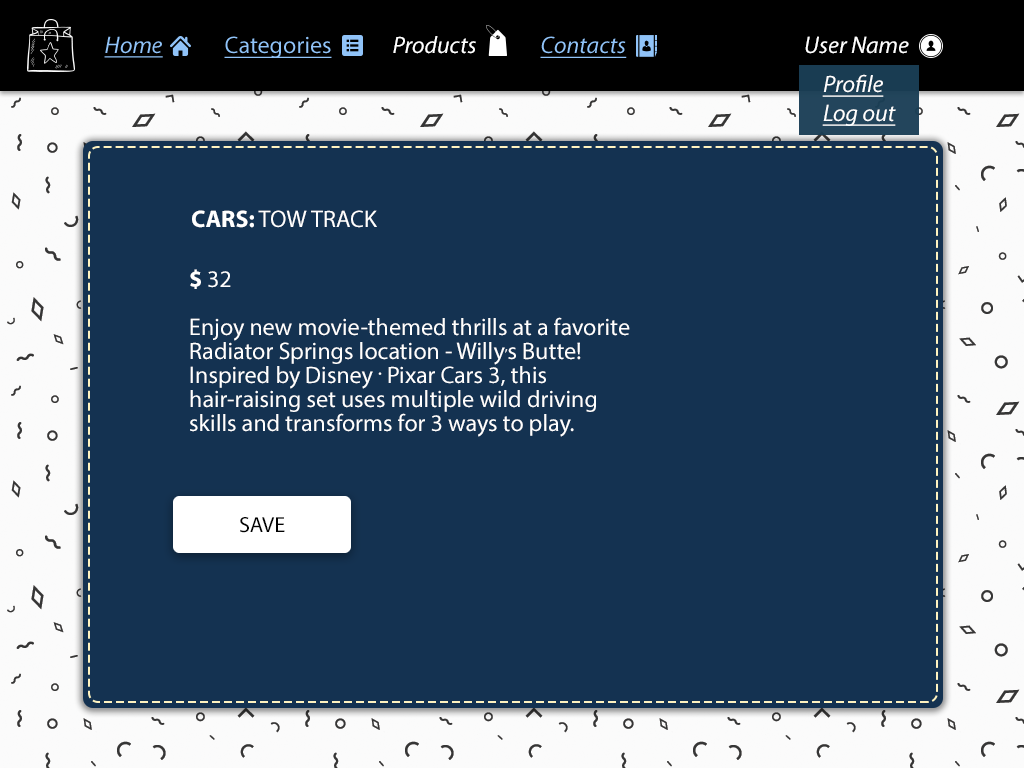
<style>
.page{position:relative;width:1024px;height:768px;background:#143251}
.page>*{position:absolute;margin:0}
.t1{font:24px "MyriadPro-It";color:#90c3f8;text-decoration:underline}
.t2{font:24px "MyriadPro-Regular";color:#90c3f8;text-decoration:underline}
.t3{font:24px "MyriadPro-It";color:#ffffff}
.t4{font:24px "MyriadPro-It";color:#ffffff;text-decoration:underline}
.t5{font:24px "MyriadPro-Regular";color:#ffffff;text-transform:uppercase}
.t6{font:24px "MyriadPro-Bold";color:#ffffff;text-transform:uppercase}
.t7{font:24px/24px "MyriadPro-Regular";color:#ffffff}
.t8{font:24px/24px "MyriadPro-Bold";color:#ffffff}
.t9{font:22px "MyriadPro-Regular";color:#020202;text-transform:uppercase}
</style>
<div class="page">
<p class="t1" style="left:104px;top:36px;width:59px;height:22px">Home</p>
<p class="t2" style="left:224px;top:36px;width:108px;height:22px">Categories</p>
<p class="t3" style="left:393px;top:36px;width:83px;height:18px">Products</p>
<p class="t1" style="left:540px;top:36px;width:87px;height:22px">Contacts</p>
<p class="t3" style="left:805px;top:36px;width:104px;height:18px">User Name</p>
<p class="t4" style="left:822px;top:74px;width:62px;height:23px">Profile</p>
<p class="t4" style="left:822px;top:104px;width:74px;height:22px">Log out</p>
<p class="t5" style="left:192px;top:210px;width:185px;height:18px"><span class="t6">cars:</span> tow track</p>
<p class="t5" style="left:190px;top:269px;width:41px;height:20px"><span class="t6">$ </span>32</p>
<p class="t7" style="left:190px;top:317px;width:440px;height:120px">Enjoy new movie-themed thrills at a favorite<br>Radiator Springs location - Willy,s Butte!<br>Inspired by Disney <span class="t8">.</span> Pixar Cars 3, this<br>hair-raising set uses multiple wild driving<br>skills and transforms for 3 ways to play.</p>
<p class="t9" style="left:240px;top:517px;width:45px;height:16px">save</p>
</div>
